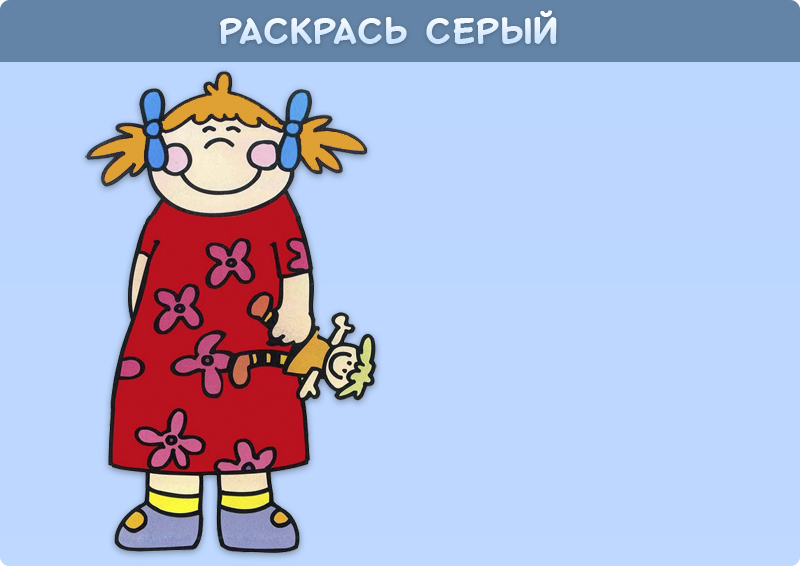
<style>
.page{position:relative;width:800px;height:566px}
.page>*{position:absolute;margin:0}
.t1{font:35px "Lasco-Bold";letter-spacing:-0.02em;color:#e0eeff;text-transform:uppercase}
</style>
<div class="page">
<p class="t1" style="left:220px;top:10px;width:337px;height:34px">раскрась  серый</p>
</div>
